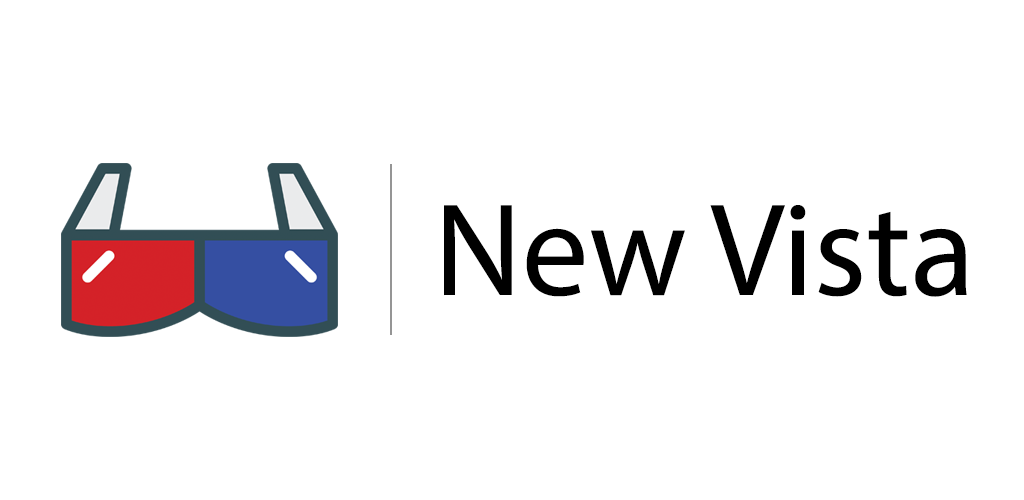
<style>
.page{position:relative;width:1024px;height:500px;background:#ffffff}
.page>*{position:absolute;margin:0}
.t1{font:133.3px "MyriadPro-Regular";color:#000000}
</style>
<div class="page">
<p class="t1" style="left:444px;top:205px;width:523px;height:92px">New Vista</p>
</div>
